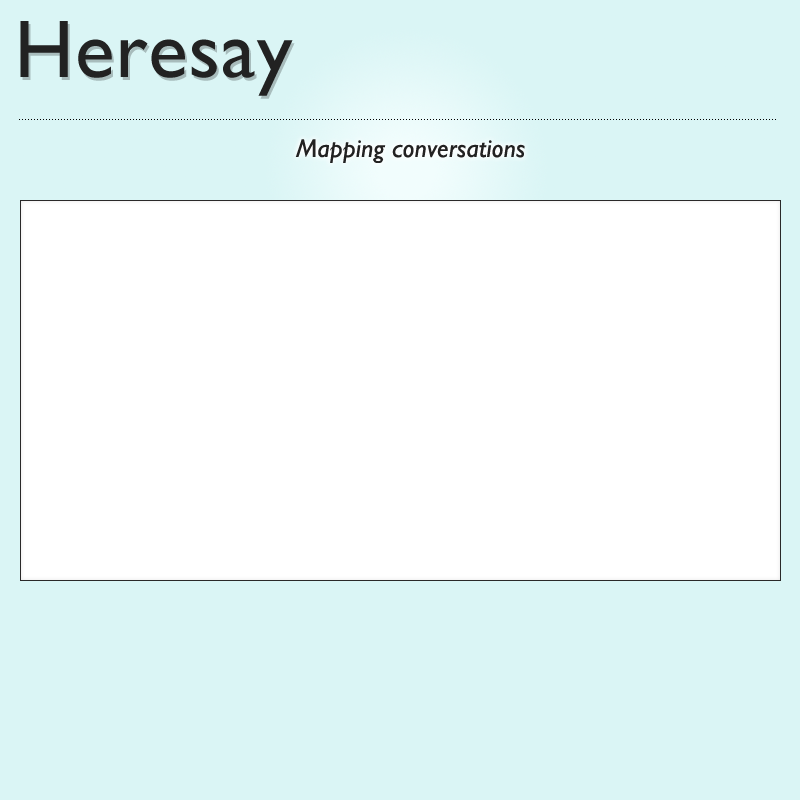
<style>
.page{position:relative;width:800px;height:800px;background:#daf5f5}
.page>*{position:absolute;margin:0}
.t1{font:82px "GillSans";letter-spacing:0.01em;color:#222222}
.t2{font:26px "GillSans-Italic";letter-spacing:0.01em;color:#222222}
</style>
<div class="page">
<p class="t1" style="left:20px;top:21px;width:273px;height:75px">Heresay</p>
<p class="t2" style="left:295px;top:139px;width:230px;height:24px">Mapping conversations</p>
</div>
